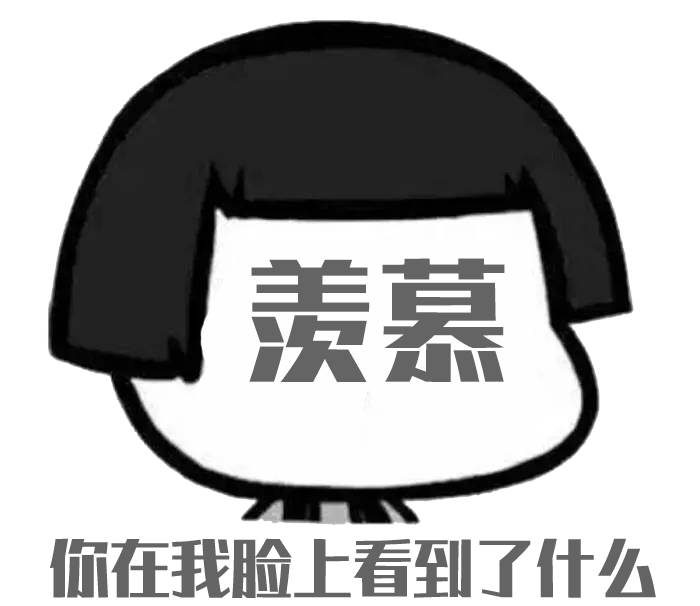
<style>
.page{position:relative;width:700px;height:606px;background:#ffffff}
.page>*{position:absolute;margin:0}
.t1{font:133.3px "AliHYAiHei";color:#656464}
.t2{font:64px "AliHYAiHei";letter-spacing:-0.05em;color:#656464}
</style>
<div class="page">
<p class="t1" style="left:249px;top:258px;width:256px;height:124px">羡慕</p>
<p class="t2" style="left:49px;top:538px;width:607px;height:60px">你在我脸上看到了什么</p>
</div>
